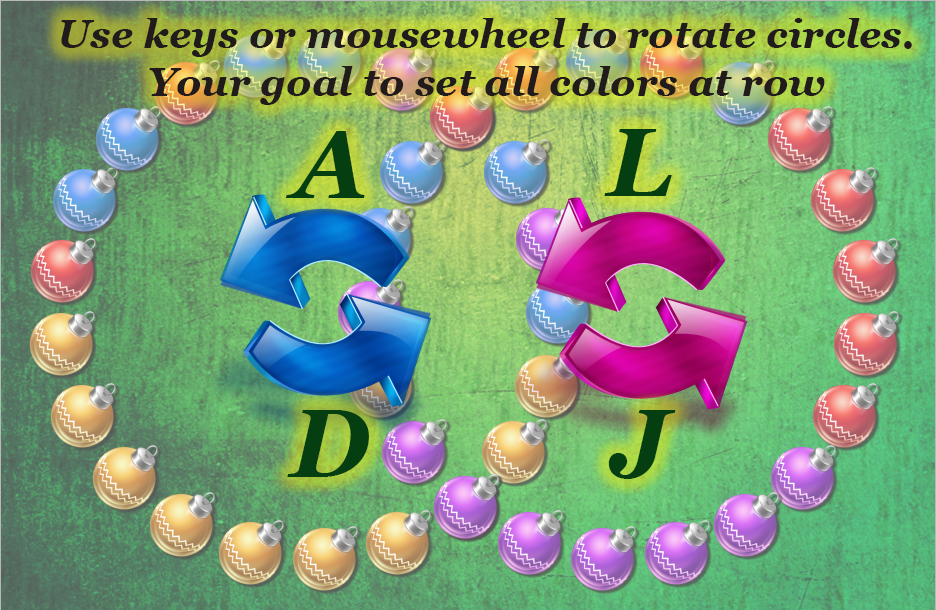
<style>
.page{position:relative;width:936px;height:610px}
.page>*{position:absolute;margin:0}
.t1{font:40px "Georgia-BoldItalic";color:#211c1b}
.t2{font:96px "Georgia-BoldItalic";color:#053e11}
</style>
<div class="page">
<p class="t1" style="left:61px;top:18px;width:851px;height:87px;text-align:center">Use keys or mousewheel to rotate circles.<br>Your goal to set all colors at row</p>
<p class="t2" style="left:285px;top:131px;width:80px;height:67px">A</p>
<p class="t2" style="left:604px;top:129px;width:68px;height:67px">L</p>
<p class="t2" style="left:287px;top:410px;width:82px;height:67px">D</p>
<p class="t2" style="left:608px;top:410px;width:68px;height:69px">J</p>
</div>
